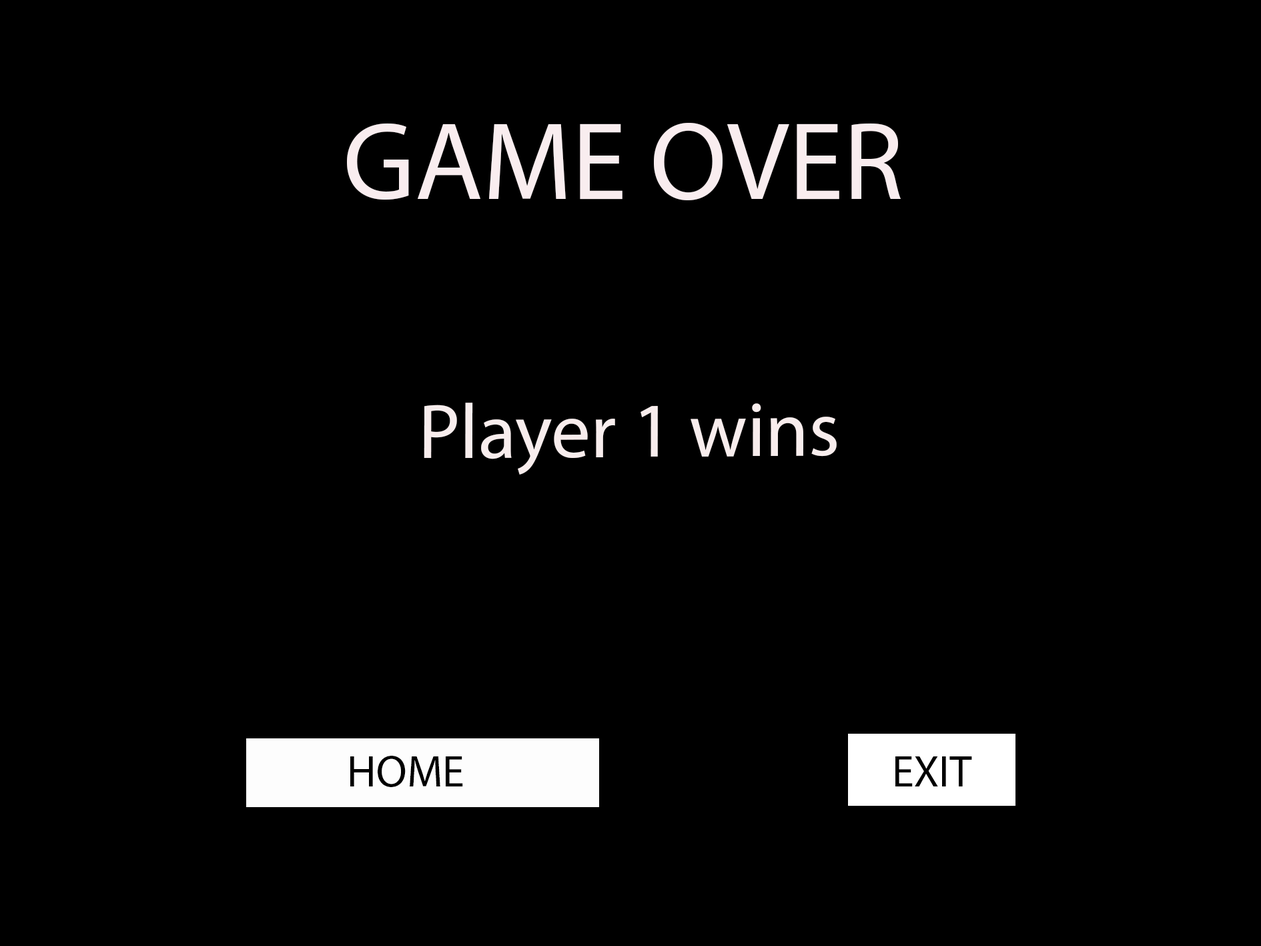
<style>
.page{position:relative;width:1261px;height:946px;background:#000000}
.page>*{position:absolute;margin:0}
.t1{font:111.2px "MyriadPro-Regular";color:#f9edef}
.t2{font:77.6px "MyriadPro-Regular";color:#f8eded}
.t3{font:44.5px "MyriadPro-Regular";color:#000000}
</style>
<div class="page">
<p class="t1" style="left:347px;top:123px;width:554px;height:77px">GAME OVER</p>
<p class="t2" style="left:424px;top:402px;width:413px;height:72px">Player 1 wins</p>
<p class="t3" style="left:350px;top:755px;width:113px;height:32px">HOME</p>
<p class="t3" style="left:895px;top:756px;width:77px;height:30px">EXIT</p>
</div>
